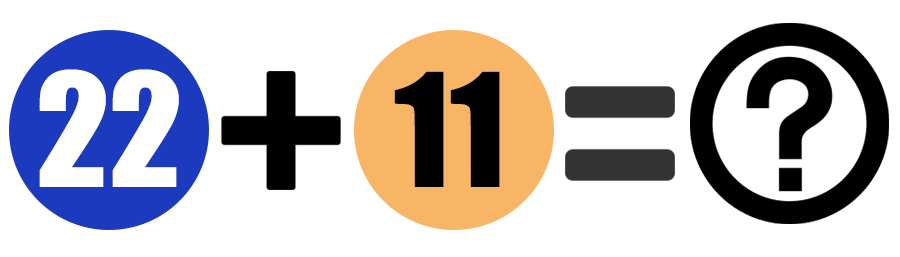
<style>
.page{position:relative;width:900px;height:257px;background:#ffffff}
.page>*{position:absolute;margin:0}
.t1{font:145.8px "Impact";color:#ffffff}
.t2{font:145.8px "Impact";color:#000000}
</style>
<div class="page">
<p class="t1" style="left:39px;top:69px;width:140px;height:118px">22</p>
<p class="t2" style="left:394px;top:71px;width:106px;height:116px">11</p>
</div>
